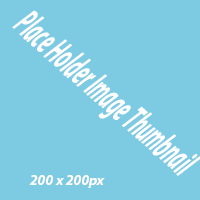
<style>
.page{position:relative;width:200px;height:200px;background:#7ccbe2}
.page>*{position:absolute;margin:0}
.t1{font:40.8px "MyriadPro-BoldIt";color:#ffffff;scale:0.42 1}
.t2{font:14.3px "MyriadPro-BoldIt";color:#ffffff}
</style>
<div class="page">
<p class="t1" style="left:12px;top:10px;width:190px;height:166px;rotate:42deg">Place Holder Image Thumbnail</p>
<p class="t2" style="left:29px;top:175px;width:76px;height:13px">200 x 200px</p>
</div>
